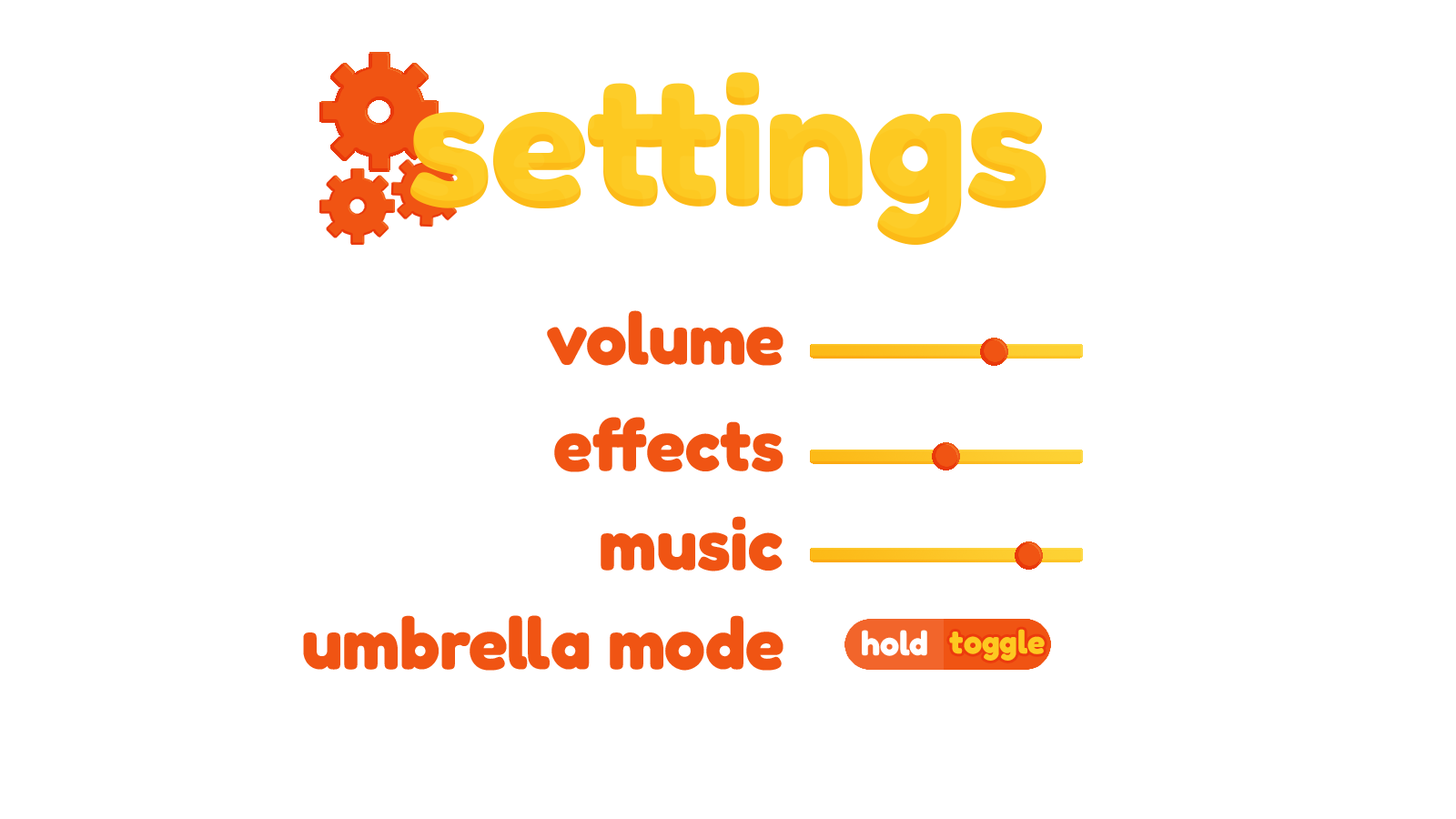
<style>
.page{position:relative;width:1456px;height:819px;background:#ffffff}
.page>*{position:absolute;margin:0}
.t1{font:182px "Fredoka-Bold";letter-spacing:-0.005em;color:#fdc921}
.t2{font:72.8px "Fredoka-Bold";letter-spacing:-0.005em;color:#f05413}
.t3{font:32.8px "Fredoka-Bold";letter-spacing:-0.005em;color:#fdc921}
</style>
<div class="page">
<p class="t1" style="left:410px;top:72px;width:636px;height:173px">settings</p>
<p class="t2" style="left:547px;top:310px;width:236px;height:56px">volume</p>
<p class="t2" style="left:554px;top:417px;width:229px;height:55px">effects</p>
<p class="t2" style="left:601px;top:516px;width:182px;height:55px">music</p>
<p class="t2" style="left:303px;top:615px;width:480px;height:56px">umbrella mode</p>
<p class="t3" style="left:949px;top:629px;width:96px;height:32px">toggle</p>
</div>
